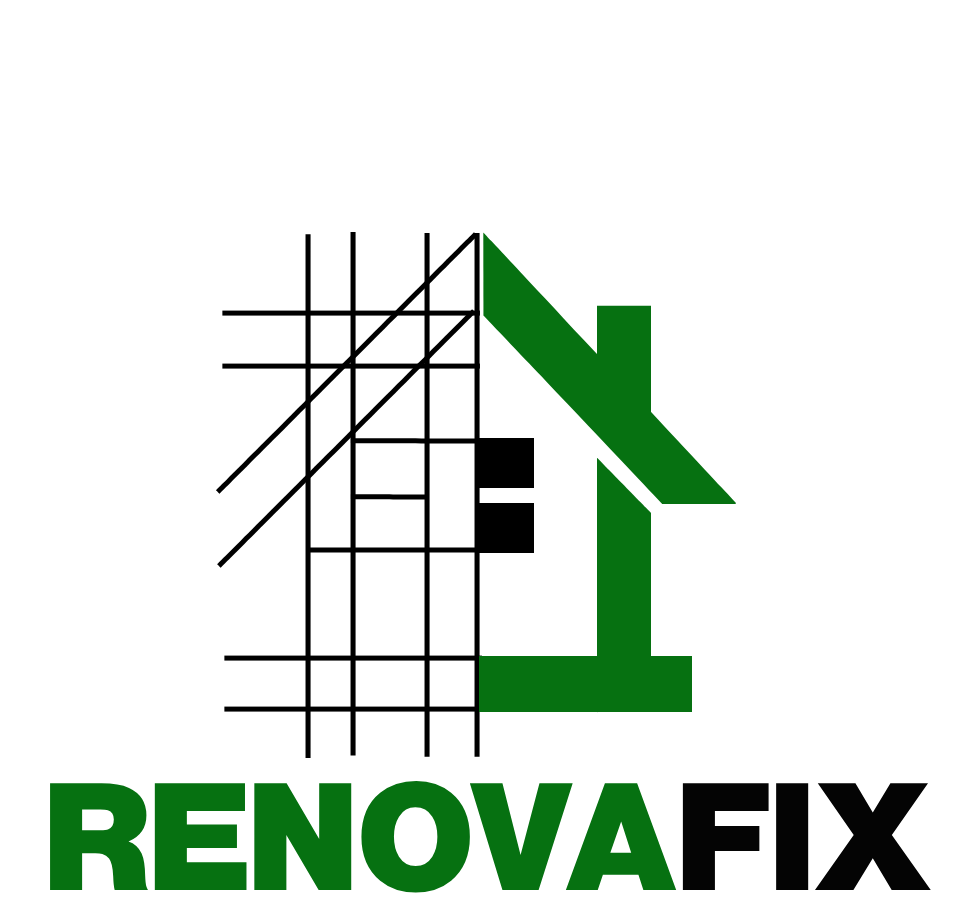
<style>
.page{position:relative;width:955px;height:921px;background:#ffffff}
.page>*{position:absolute;margin:0}
.t1{font:160px "NimbusSansBeckerPBla";letter-spacing:0.017em;color:#067111}
.t2{font:160px "NimbusSansBeckerPBla";letter-spacing:0.017em;color:#040404}
</style>
<div class="page">
<p class="t1" style="left:50px;top:780px;width:881px;height:113px">RENOVA<span class="t2">FIX</span></p>
</div>
